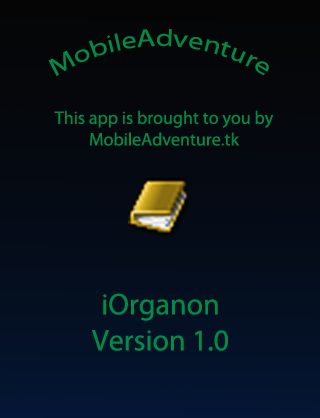
<style>
.page{position:relative;width:320px;height:418px}
.page>*{position:absolute;margin:0}
.t1{font:24px "MyriadPro-Regular";color:#008c46}
.t2{font:18px "MyriadPro-Regular";color:#008c46}
.t3{font:30px "MyriadPro-Regular";color:#008c46}
</style>
<div class="page">
<p class="t1" style="left:48px;top:29px;width:221px;height:47px;text-align:center">MobileAdventure</p>
<p class="t2" style="left:54px;top:110px;width:220px;height:36px;text-align:center">This app is brought to you by <br>MobileAdventure.tk</p>
<p class="t3" style="left:92px;top:293px;width:136px;height:58px;text-align:center">iOrganon<br>Version 1.0</p>
</div>
